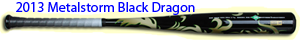
<style>
.page{position:relative;width:300px;height:40px;background:#ffffff}
.page>*{position:absolute;margin:0}
.t1{font:14px "MyriadPro-Regular";color:#0000ff}
</style>
<div class="page">
<p class="t1" style="left:16px;top:2px;width:179px;height:13px">2013 Metalstorm Black Dragon</p>
</div>
